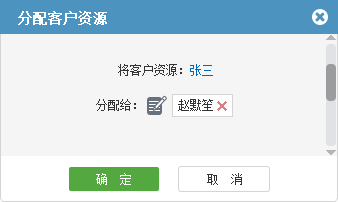
<style>
.page{position:relative;width:338px;height:202px;background:#f5f5f5}
.page>*{position:absolute;margin:0}
.t1{font:14px "SimSun";color:#ffffff;font-weight:bold}
.t2{font:12px "SimSun";color:#333333}
.t3{font:12px "SimSun";color:#0068b7}
.t4{font:12px "SimSun";color:#ffffff}
</style>
<div class="page">
<p class="t1" style="left:18px;top:11px;width:89px;height:14px">分配客户资源</p>
<p class="t2" style="left:118px;top:64px;width:95px;height:12px">将客户资源：<span class="t3">张三</span></p>
<p class="t2" style="left:96px;top:99px;width:40px;height:12px">分配给：</p>
<p class="t2" style="left:178px;top:99px;width:35px;height:12px">赵默笙</p>
<p class="t4" style="left:96px;top:173px;width:35px;height:12px">确  定</p>
<p class="t2" style="left:207px;top:173px;width:35px;height:12px">取  消</p>
</div>
